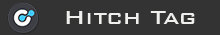
<style>
.page{position:relative;width:220px;height:35px;background:#333333}
.page>*{position:absolute;margin:0}
.t1{font:25px "BankGothicBT-Medium";color:#efefed}
</style>
<div class="page">
<p class="t1" style="left:66px;top:11px;width:129px;height:13px">Hitch Tag</p>
</div>
